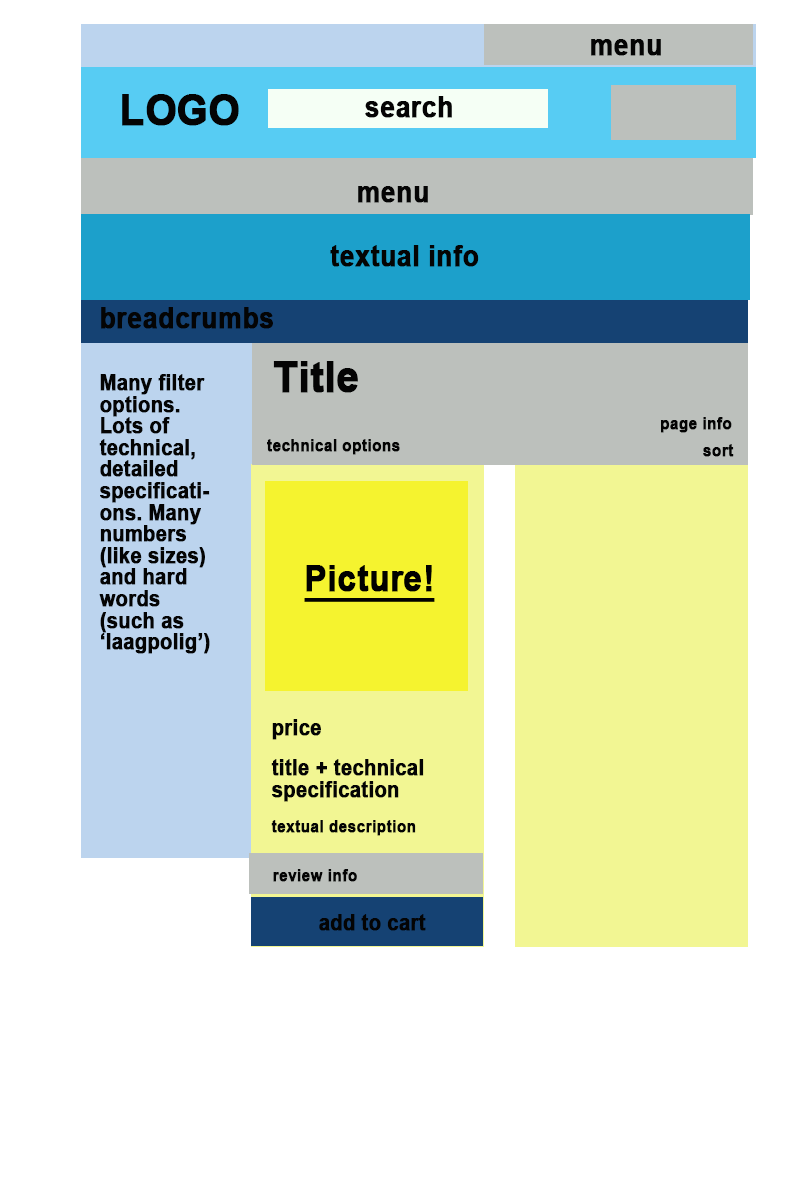
<style>
.page{position:relative;width:800px;height:1200px;background:#ffffff}
.page>*{position:absolute;margin:0}
.t1{font:28.8px "Arial-BoldMT";color:#040404;font-weight:bold;scale:0.92 1}
.t2{font:43.2px "Arial-BoldMT";color:#040404;font-weight:bold;scale:0.92 1}
.t3{font:21.6px "Arial-BoldMT";color:#040404;font-weight:bold;scale:0.92 1}
.t4{font:16.8px "Arial-BoldMT";color:#040404;font-weight:bold;scale:0.92 1}
.t5{font:36px "Arial-BoldMT";color:#000000;font-weight:bold;text-decoration:underline;scale:0.92 1}
</style>
<div class="page">
<p class="t1" style="left:591px;top:39px;width:70px;height:17px">menu</p>
<p class="t2" style="left:122px;top:94px;width:117px;height:32px">LOGO</p>
<p class="t1" style="left:365px;top:96px;width:87px;height:22px">search</p>
<p class="t1" style="left:358px;top:186px;width:70px;height:17px">menu</p>
<p class="t1" style="left:330px;top:245px;width:149px;height:22px">textual info</p>
<p class="t1" style="left:101px;top:307px;width:172px;height:22px">breadcrumbs</p>
<p class="t2" style="left:273px;top:361px;width:85px;height:32px">Title</p>
<p class="t3" style="left:99px;top:374px;width:111px;height:280px">Many filter options. Lots of technical, detailed specifications. Many numbers (like sizes) and hard words (such as ‘laagpolig’)</p>
<p class="t4" style="left:661px;top:417px;width:71px;height:16px">page info</p>
<p class="t4" style="left:267px;top:439px;width:133px;height:16px">technical options</p>
<p class="t4" style="left:703px;top:444px;width:31px;height:13px">sort</p>
<p class="t5" style="left:304px;top:565px;width:131px;height:37px">Picture!</p>
<p class="t3" style="left:272px;top:719px;width:49px;height:21px">price</p>
<p class="t3" style="left:271px;top:759px;width:153px;height:43px">title + technical<br>specification</p>
<p class="t4" style="left:271px;top:820px;width:145px;height:16px">textual description</p>
<p class="t4" style="left:273px;top:869px;width:84px;height:13px">review info</p>
<p class="t3" style="left:319px;top:914px;width:107px;height:17px">add to cart</p>
</div>
